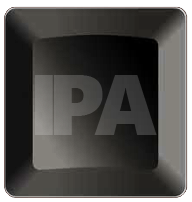
<style>
.page{position:relative;width:192px;height:202px}
.page>*{position:absolute;margin:0}
.t1{font:85px "SegoeUIBlack";letter-spacing:-0.125em}
</style>
<div class="page">
<p class="t1" style="left:34px;top:75px;width:123px;height:60px">IPA</p>
<p class="t1" style="left:34px;top:75px;width:123px;height:60px">IPA</p>
</div>
